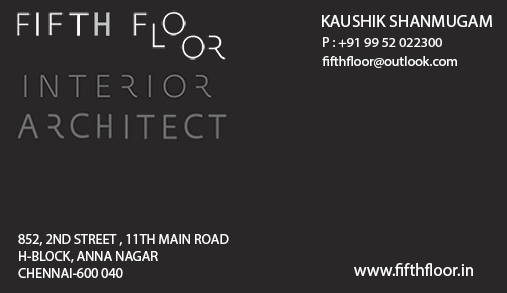
<style>
.page{position:relative;width:507px;height:293px;background:#292728}
.page>*{position:absolute;margin:0}
.t1{font:17px "MyriadPro-Regular";color:#ffffff;text-transform:uppercase;scale:1.03 1}
.t2{font:13.8px "MyriadPro-Regular";color:#ffffff}
.t3{font:14px "MyriadPro-Regular";color:#ffffff}
.t4{font:17.5px "MyriadPro-Regular";color:#ffffff}
</style>
<div class="page">
<p class="t1" style="left:322px;top:15px;width:170px;height:12px">kaushik shanmugam</p>
<p class="t2" style="left:323px;top:37px;width:119px;height:11px">P : +91 99 52 022300</p>
<p class="t3" style="left:322px;top:56px;width:135px;height:12px">fifthfloor@outlook.com</p>
<p class="t3" style="left:18px;top:234px;width:211px;height:44px">852, 2ND STREET , 11TH MAIN ROAD<br>H-BLOCK, ANNA NAGAR<br>CHENNAI-600 040</p>
<p class="t4" style="left:354px;top:263px;width:119px;height:13px">www.fifthfloor.in</p>
</div>
